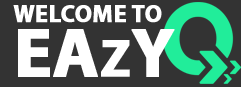
<style>
.page{position:relative;width:241px;height:87px;background:#333333}
.page>*{position:absolute;margin:0}
.t1{font:24px "MyriadPro-Bold";color:#ffffff;text-transform:uppercase;font-weight:bold}
.t2{font:70px "MyriadPro-Bold";color:#ffffff;text-transform:uppercase;font-weight:bold}
.t3{font:51.9px "MyriadPro-Bold";color:#ffffff;text-transform:uppercase;font-weight:bold}
</style>
<div class="page">
<p class="t1" style="left:13px;top:5px;width:149px;height:18px">WELCOME TO</p>
<p class="t2" style="left:18px;top:29px;width:157px;height:48px">EA<span class="t3">Z</span>Y</p>
</div>
